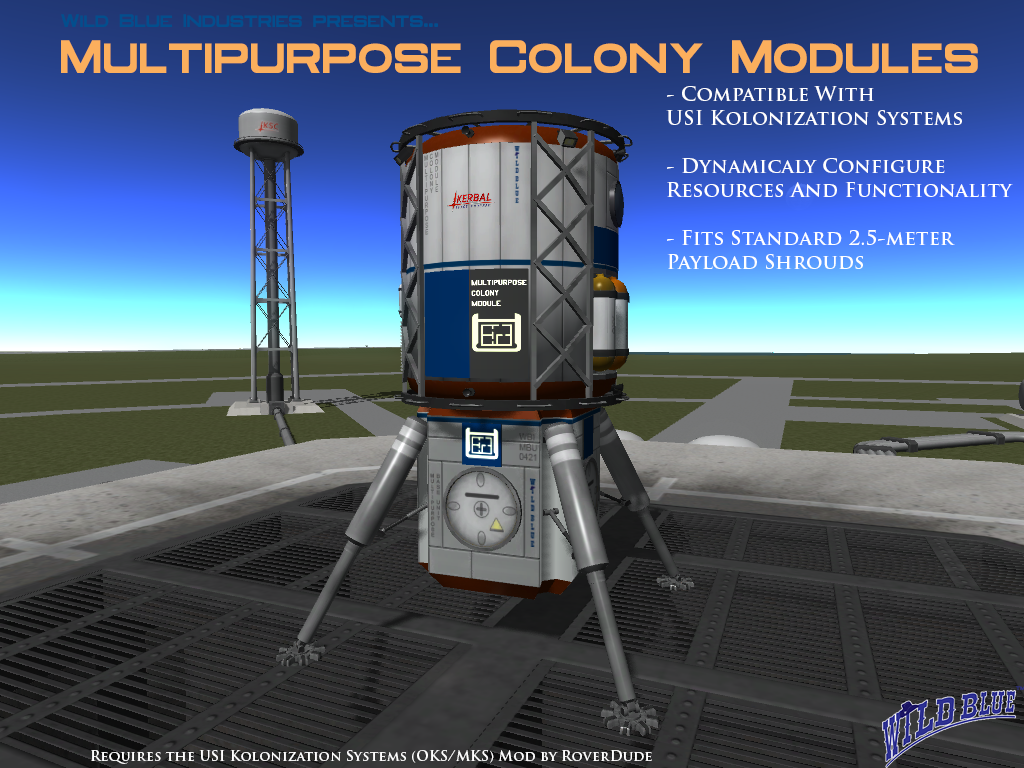
<style>
.page{position:relative;width:1024px;height:768px}
.page>*{position:absolute;margin:0}
.t1{font:14px "OldRepublic-Bold";color:#034e8d}
.t2{font:36px "OldRepublic-Bold";color:#fbaf5d}
.t3{font:20px "TrajanPro-Bold";color:#ffffff}
.t4{font:14px "TrajanPro-Bold";color:#ffffff}
</style>
<div class="page">
<p class="t1" style="left:61px;top:14px;width:377px;height:13px">Wild Blue Industries presents...</p>
<p class="t2" style="left:61px;top:40px;width:917px;height:33px">Multipurpose Colony Modules</p>
<p class="t3" style="left:666px;top:86px;width:347px;height:183px">- Compatible With<br>USI Kolonization Systems<br><br>- Dynamicaly Configure<br>Resources And Functionality<br><br>- Fits Standard 2.5-meter<br>Payload Shrouds</p>
<p class="t4" style="left:91px;top:750px;width:561px;height:14px">Requires the USI Kolonization Systems (OKS/MKS) Mod by RoverDude</p>
</div>
